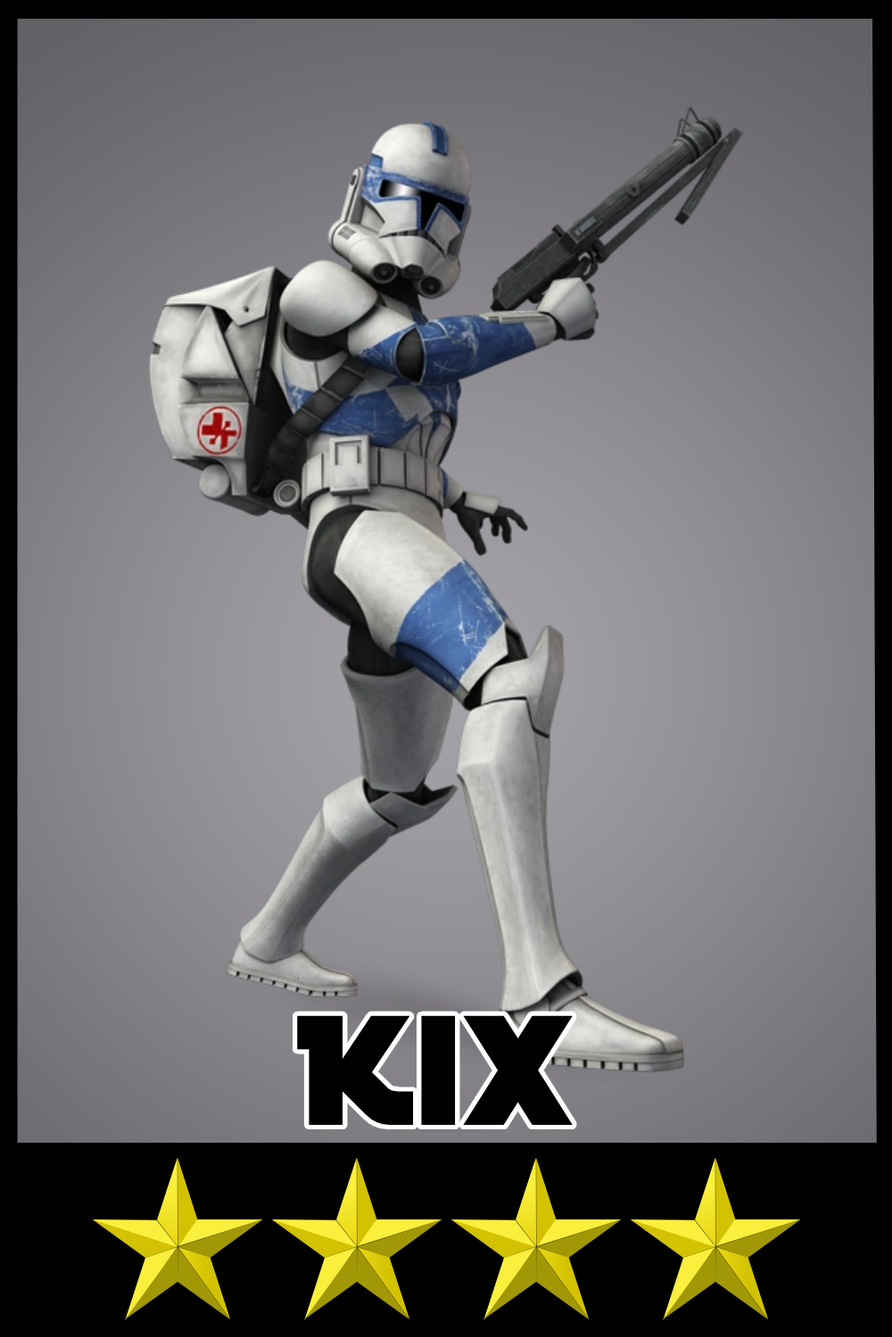
<style>
.page{position:relative;width:892px;height:1337px}
.page>*{position:absolute;margin:0}
.t1{font:167.7px "DistantGalaxy";color:#000000}
</style>
<div class="page">
<p class="t1" style="left:297px;top:1016px;width:275px;height:109px">Kix</p>
</div>
